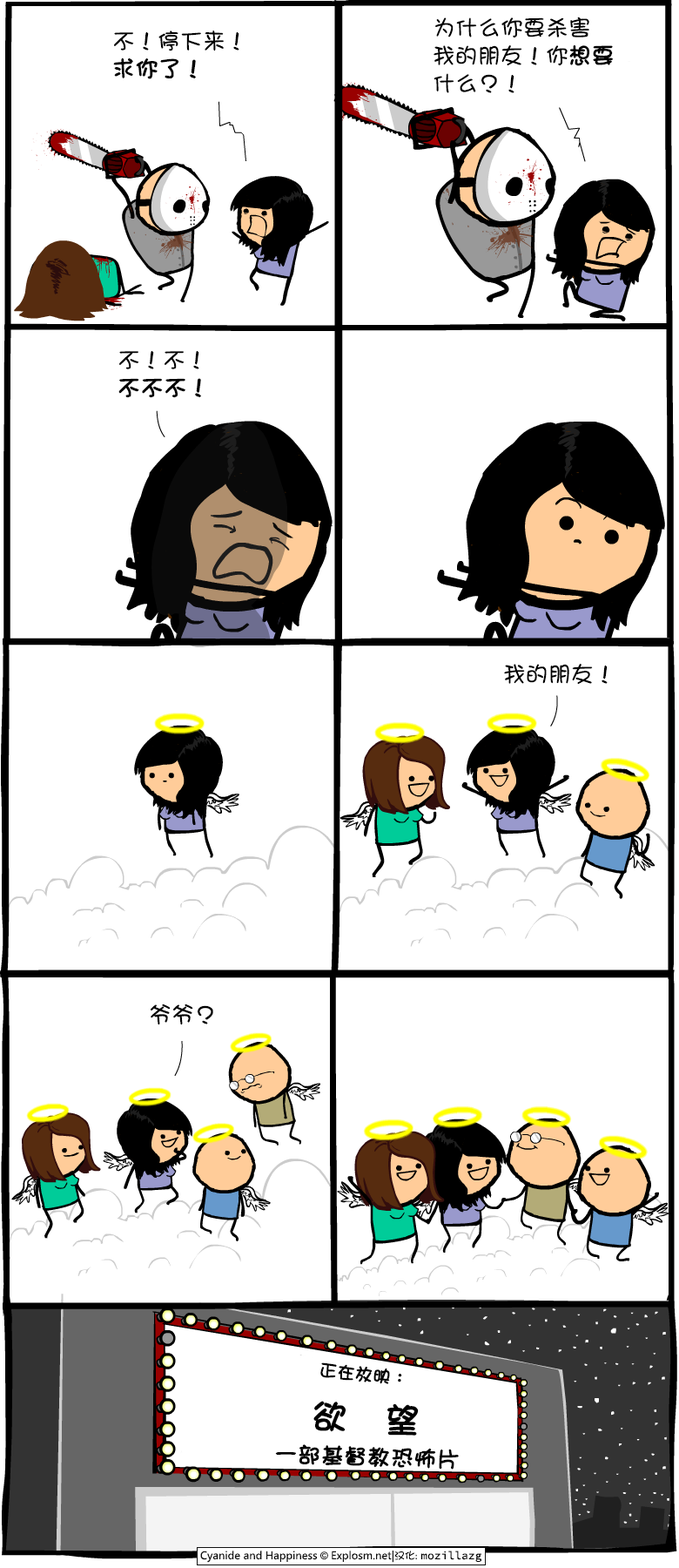
<style>
.page{position:relative;width:679px;height:1568px;background:#ffffff}
.page>*{position:absolute;margin:0}
.t1{font:22.6px/27.9px "DFGirl";color:#000000}
.t2{font:22.6px/27.9px "DFGirl";color:#000000;font-weight:bold}
.t3{font:22.6px "DFGirl";color:#000000}
.t4{font:17.4px "DFGirl";color:#000000;font-weight:bold}
.t5{font:34.8px "DFGirl";letter-spacing:1.06em;color:#000000;font-weight:bold}
.t6{font:22.6px "DFGirl";color:#000000;font-weight:bold}
</style>
<div class="page">
<p class="t1" style="left:434px;top:17px;width:180px;height:76px">为什么你要杀害<br>我的朋友！你<span class="t2">想要<br></span>什么？！</p>
<p class="t1" style="left:113px;top:30px;width:127px;height:49px">不！停下来！<br><span class="t2">求你了！</span></p>
<p class="t1" style="left:118px;top:351px;width:83px;height:47px">不！不！<br><span class="t2">不不不！</span></p>
<p class="t3" style="left:504px;top:664px;width:104px;height:20px">我的朋友！</p>
<p class="t3" style="left:151px;top:1004px;width:62px;height:21px">爷爷？</p>
<p class="t4" style="left:321px;top:1362px;width:81px;height:22px;rotate:6deg">正在放映：</p>
<p class="t5" style="left:314px;top:1401px;width:105px;height:35px;rotate:3deg">欲望</p>
<p class="t6" style="left:275px;top:1444px;width:184px;height:26px;rotate:2deg">一部基督教恐怖片</p>
</div>
